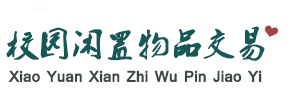
<style>
.page{position:relative;width:295px;height:91px;background:#ffffff}
.page>*{position:absolute;margin:0}
.t1{font:32px "2.0-";color:#145857;font-weight:bold}
.t2{font:18.7px "Tunga";color:#3c4646;font-weight:bold}
</style>
<div class="page">
<p class="t1" style="left:6px;top:26px;width:259px;height:35px">校园闲置物品交易</p>
<p class="t2" style="left:9px;top:70px;width:253px;height:12px">Xiao Yuan Xian Zhi Wu Pin Jiao Yi</p>
</div>
